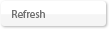
<style>
.page{position:relative;width:110px;height:30px;background:#ffffff}
.page>*{position:absolute;margin:0}
.t1{font:11px "MyriadPro-Regular";color:#737373}
</style>
<div class="page">
<p class="t1" style="left:12px;top:10px;width:33px;height:8px">Refresh</p>
</div>
